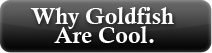
<style>
.page{position:relative;width:212px;height:53px}
.page>*{position:absolute;margin:0}
.t1{font:22.9px "CalisMTBol";color:#fefefe}
</style>
<div class="page">
<p class="t1" style="left:30px;top:7px;width:144px;height:22px">Why Goldfish</p>
<p class="t1" style="left:54px;top:26px;width:100px;height:17px">Are Cool.</p>
</div>
